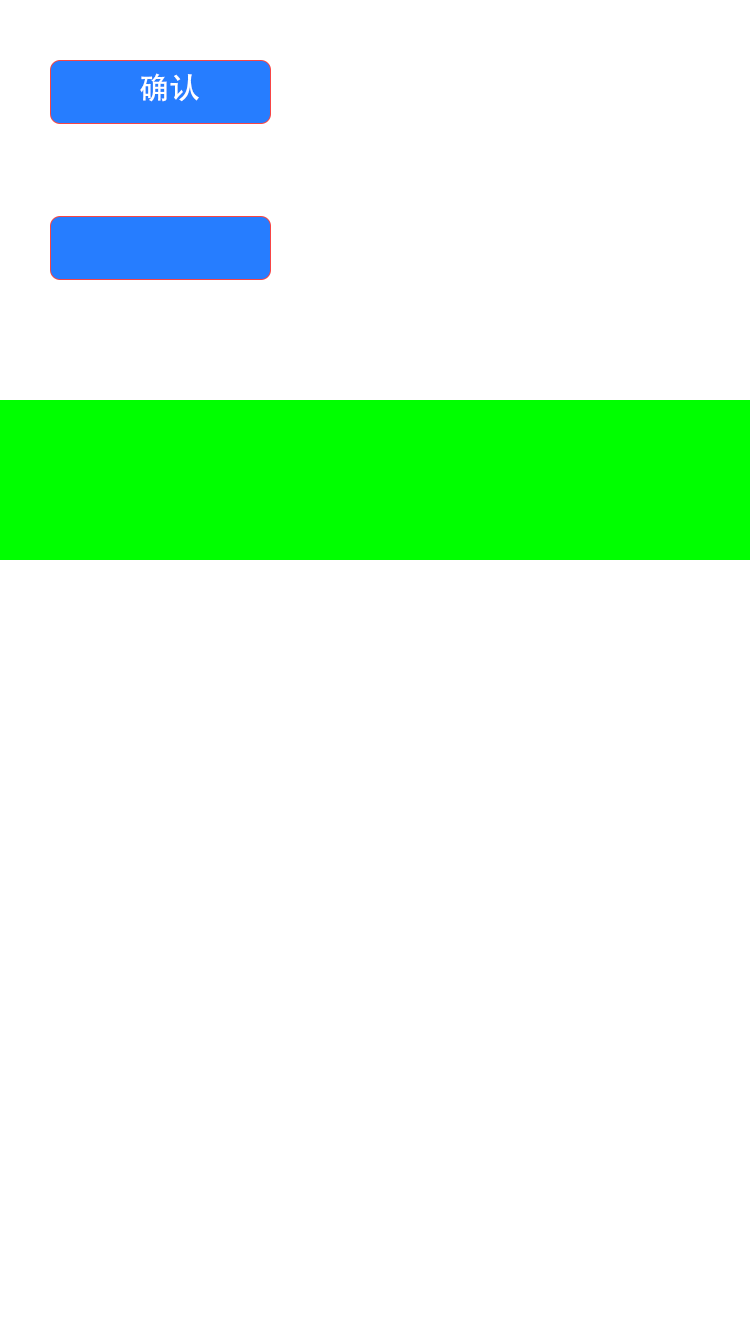
<style>
.page{position:relative;width:750px;height:1334px;background:#ffffff}
.page>*{position:absolute;margin:0}
.t1{font:30px "AdobeHeitiStd-Regular";color:#ffffff}
</style>
<div class="page">
<p class="t1" style="left:140px;top:73px;width:59px;height:29px">确认</p>
</div>
